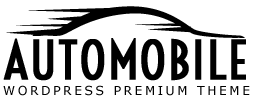
<style>
.page{position:relative;width:263px;height:98px;background:#ffffff}
.page>*{position:absolute;margin:0}
.t1{font:87.5px "Voltaire";color:#000000;text-transform:uppercase;font-weight:bold}
.t2{font:20.8px "Verdana";letter-spacing:0.22em;color:#000000;text-transform:uppercase}
</style>
<div class="page">
<p class="t1" style="left:3px;top:38px;width:243px;height:43px">automobile</p>
<p class="t2" style="left:3px;top:85px;width:247px;height:11px">wordpress premium theme</p>
</div>
